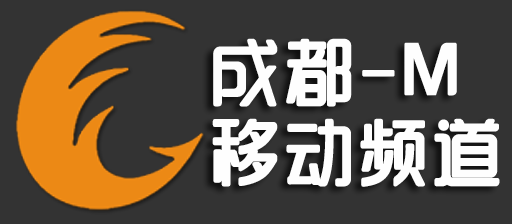
<style>
.page{position:relative;width:512px;height:224px;background:#333333}
.page>*{position:absolute;margin:0}
.t1{font:72px/80px "SJyunlvyuan";color:#fefefe;font-weight:bold}
</style>
<div class="page">
<p class="t1" style="left:212px;top:38px;width:288px;height:149px">成都-M<br>移动频道</p>
</div>
